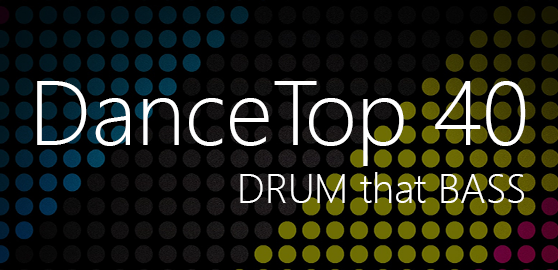
<style>
.page{position:relative;width:558px;height:270px;background:#000000}
.page>*{position:absolute;margin:0}
.t1{font:91.7px "SegoeUI-Light";color:#ffffff}
.t2{font:41px "SegoeUI-Light";color:#ffffff}
</style>
<div class="page">
<p class="t1" style="left:37px;top:81px;width:489px;height:85px">DanceTop 40</p>
<p class="t2" style="left:240px;top:172px;width:284px;height:31px">DRUM that BASS</p>
</div>
